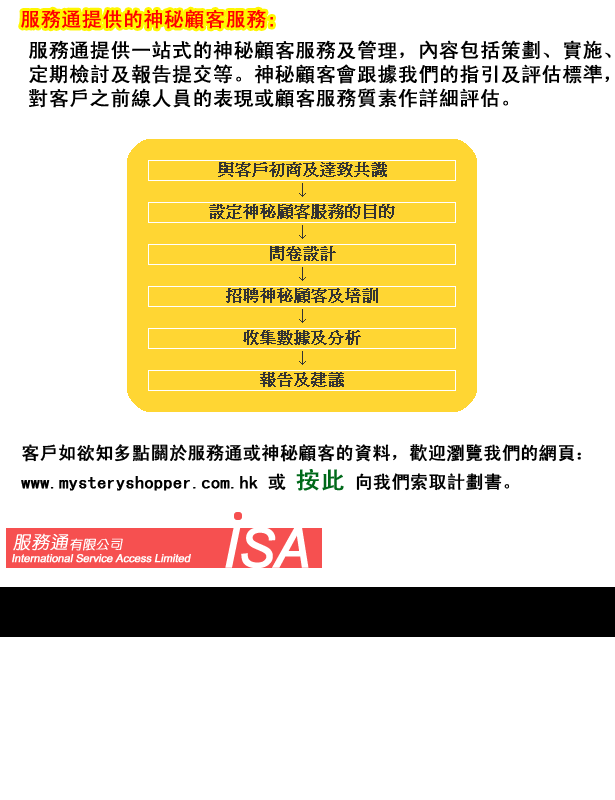
<style>
.page{position:relative;width:615px;height:800px;background:#ffffff}
.page>*{position:absolute;margin:0}
.t1{font:20px "SimHei";color:#ff0000;font-weight:bold}
.t2{font:20px "SimHei";color:#000000;font-weight:bold}
.t3{font:18px "SimHei";color:#000000;font-weight:bold}
.t4{font:24px "SimHei";color:#006919;font-weight:bold}
</style>
<div class="page">
<p class="t1" style="left:21px;top:9px;width:252px;height:20px">服務通提供的神秘顧客服務:</p>
<p class="t2" style="left:29px;top:40px;width:582px;height:68px">服務通提供一站式的神秘顧客服務及管理，內容包括策劃、實施、<br>定期檢討及報告提交等。神秘顧客會跟據我們的指引及評估標準，<br>對客戶之前線人員的表現或顧客服務質素作詳細評估。</p>
<p class="t3" style="left:21px;top:444px;width:560px;height:47px">客戶如欲知多點關於服務通或神秘顧客的資料，歡迎瀏覽我們的網頁：<br>www.mysteryshopper.com.hk 或 <span class="t4">按此</span> 向我們索取計劃書。</p>
</div>
